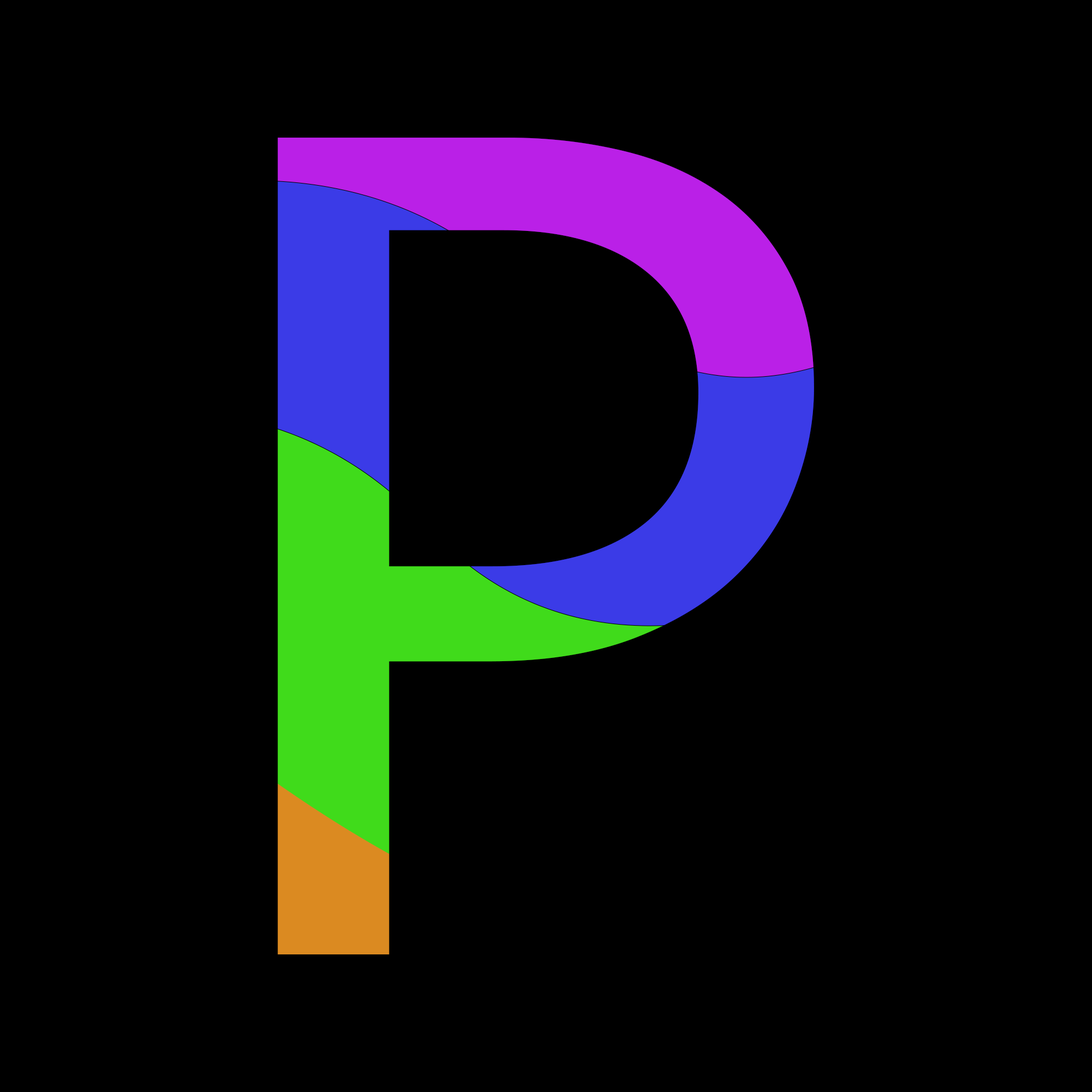
<style>
.page{position:relative;width:1092px;height:1092px;background:#000000}
.page>*{position:absolute;margin:0}
.t1{font:1280px "Consolas"}
</style>
<div class="page">
<p class="t1" style="left:277px;top:138px;width:537px;height:816px">P</p>
</div>
